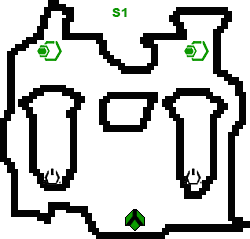
<style>
.page{position:relative;width:250px;height:239px;background:#ffffff}
.page>*{position:absolute;margin:0}
.t1{font:12px "Arial-Black";color:#0c9801}
</style>
<div class="page">
<p class="t1" style="left:112px;top:8px;width:15px;height:9px">S1</p>
</div>
